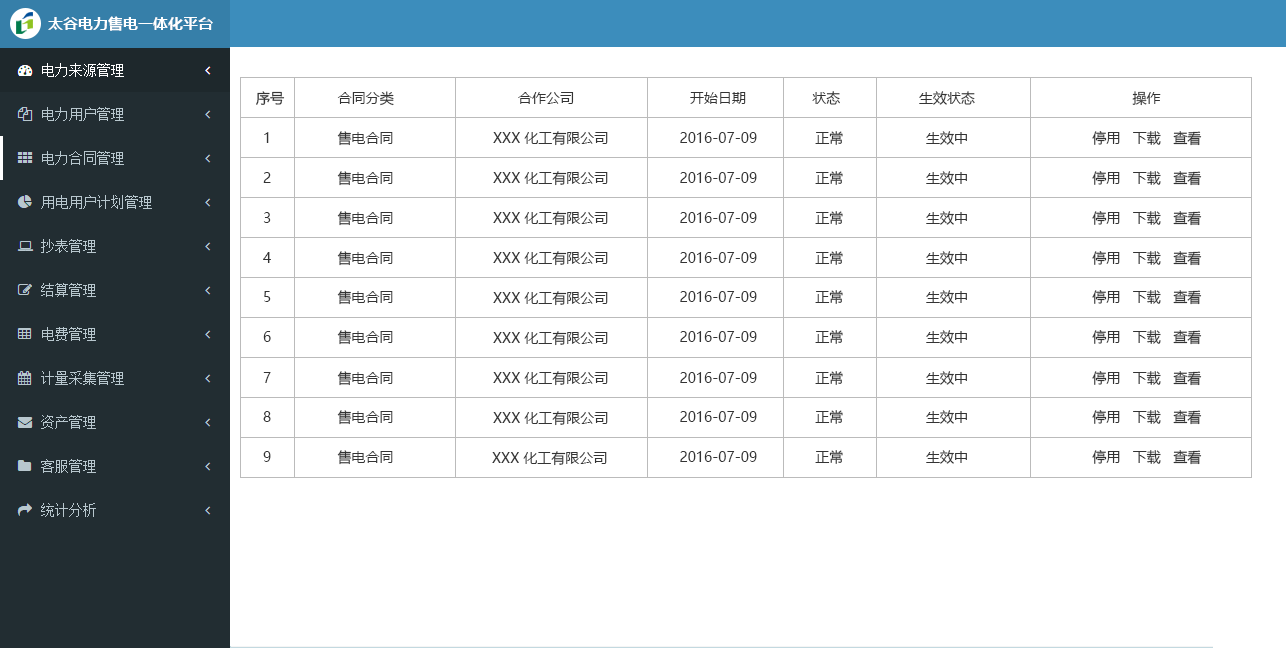
<style>
.page{position:relative;width:1286px;height:648px;background:#ffffff}
.page>*{position:absolute;margin:0}
.t1{font:15px "MicrosoftYaHei-Bold";color:#ffffff}
.t2{font:14px "MicrosoftYaHei";color:#333333}
</style>
<div class="page">
<p class="t1" style="left:48px;top:16px;width:165px;height:15px">太谷电力售电一体化平台</p>
<p class="t2" style="left:256px;top:91px;width:905px;height:15px">序号             合同分类                              合作公司                            开始日期                状态                   生效状态                                      操作</p>
<p class="t2" style="left:264px;top:131px;width:938px;height:15px">1                售电合同                                                                     2016-07-09              正常                    生效中                              停用   下载   查看</p>
<p class="t2" style="left:493px;top:131px;width:115px;height:15px">XXX 化工有限公司</p>
<p class="t2" style="left:263px;top:171px;width:939px;height:15px">2                售电合同                                                                     2016-07-09              正常                    生效中                              停用   下载   查看</p>
<p class="t2" style="left:493px;top:171px;width:115px;height:15px">XXX 化工有限公司</p>
<p class="t2" style="left:263px;top:211px;width:939px;height:15px">3                售电合同                                                                     2016-07-09              正常                    生效中                              停用   下载   查看</p>
<p class="t2" style="left:493px;top:211px;width:115px;height:15px">XXX 化工有限公司</p>
<p class="t2" style="left:263px;top:251px;width:939px;height:15px">4                售电合同                                                                     2016-07-09              正常                    生效中                              停用   下载   查看</p>
<p class="t2" style="left:493px;top:251px;width:115px;height:15px">XXX 化工有限公司</p>
<p class="t2" style="left:264px;top:290px;width:938px;height:15px">5                售电合同                                                                     2016-07-09              正常                    生效中                              停用   下载   查看</p>
<p class="t2" style="left:493px;top:291px;width:115px;height:15px">XXX 化工有限公司</p>
<p class="t2" style="left:263px;top:330px;width:939px;height:15px">6                售电合同                                                                     2016-07-09              正常                    生效中                              停用   下载   查看</p>
<p class="t2" style="left:493px;top:331px;width:115px;height:15px">XXX 化工有限公司</p>
<p class="t2" style="left:263px;top:371px;width:939px;height:15px">7                售电合同                                                                     2016-07-09              正常                    生效中                              停用   下载   查看</p>
<p class="t2" style="left:493px;top:371px;width:115px;height:15px">XXX 化工有限公司</p>
<p class="t2" style="left:263px;top:410px;width:939px;height:15px">8                售电合同                                                                     2016-07-09              正常                    生效中                              停用   下载   查看</p>
<p class="t2" style="left:493px;top:411px;width:115px;height:15px">XXX 化工有限公司</p>
<p class="t2" style="left:263px;top:450px;width:939px;height:15px">9                售电合同                                                                     2016-07-09              正常                    生效中                              停用   下载   查看</p>
<p class="t2" style="left:492px;top:451px;width:115px;height:15px">XXX 化工有限公司</p>
</div>
